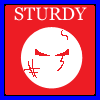
<style>
.page{position:relative;width:100px;height:100px;background:#ed1c24}
.page>*{position:absolute;margin:0}
.t1{font:18px "Georgia";color:#ffffff}
</style>
<div class="page">
<p class="t1" style="left:14px;top:7px;width:73px;height:14px">STURDY</p>
</div>
